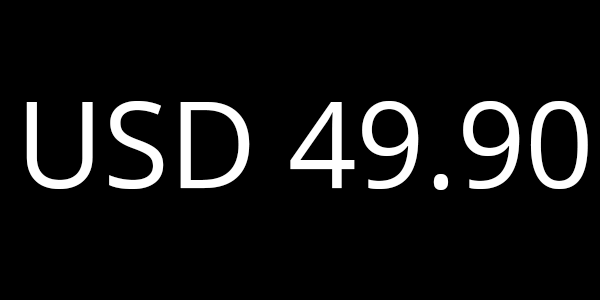
<style>
.page{position:relative;width:600px;height:300px;background:#000000}
.page>*{position:absolute;margin:0}
.t1{font:120px "OpenSans-Regular";color:#ffffff}
</style>
<div class="page">
<p class="t1" style="left:26px;top:101px;width:562px;height:89px">USD 49.90</p>
</div>
